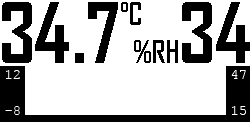
<style>
.page{position:relative;width:250px;height:122px;background:#ffffff}
.page>*{position:absolute;margin:0}
.t1{font:80px "AgencyFB-Bold";color:#000000}
.t2{font:30px "AgencyFB-Bold";color:#000000}
.t3{font:14px "CourierNewPSMT";color:#ffffff}
</style>
<div class="page">
<p class="t1" style="left:2px;top:2px;width:116px;height:61px">34.7</p>
<p class="t2" style="left:121px;top:2px;width:20px;height:23px">°C</p>
<p class="t1" style="left:182px;top:2px;width:68px;height:61px">34</p>
<p class="t2" style="left:134px;top:40px;width:44px;height:23px">%RH</p>
<p class="t3" style="left:5px;top:70px;width:15px;height:9px">12</p>
<p class="t3" style="left:231px;top:70px;width:15px;height:9px">47</p>
<p class="t3" style="left:5px;top:106px;width:15px;height:9px">-8</p>
<p class="t3" style="left:231px;top:106px;width:15px;height:9px">15</p>
</div>
